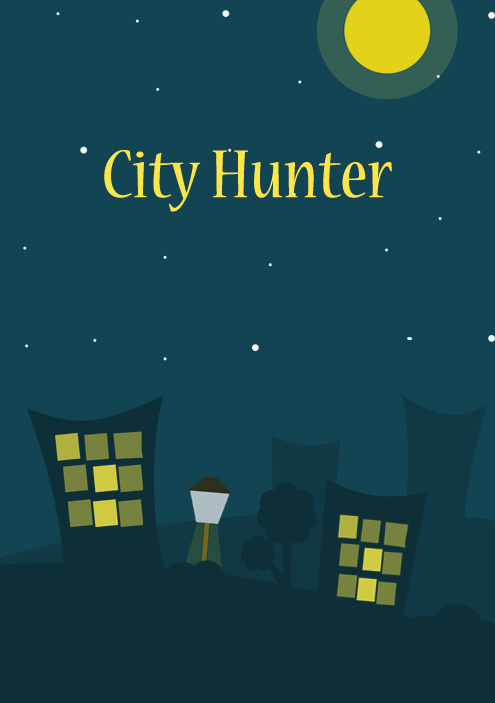
<style>
.page{position:relative;width:495px;height:703px;background:#134454}
.page>*{position:absolute;margin:0}
.t1{font:75.3px "NuevaStd-Cond";color:#fce54a;scale:1.11 1}
</style>
<div class="page">
<p class="t1" style="left:104px;top:150px;width:288px;height:62px">City Hunter</p>
</div>
